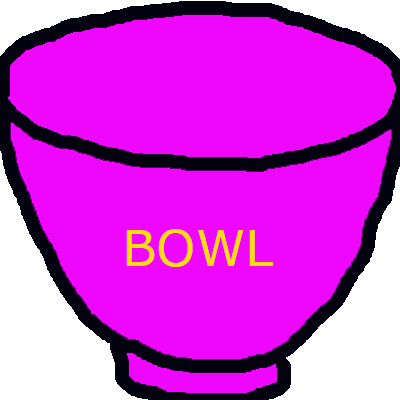
<style>
.page{position:relative;width:400px;height:400px;background:#ee06fd}
.page>*{position:absolute;margin:0}
.t1{font:50px "Verdana";color:#fddd06}
</style>
<div class="page">
<p class="t1" style="left:126px;top:229px;width:147px;height:38px">BOWL</p>
</div>
